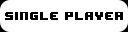
<style>
.page{position:relative;width:128px;height:32px;background:#ffffff}
.page>*{position:absolute;margin:0}
.t1{font:10px "8BITWONDERNominal";color:#000000}
</style>
<div class="page">
<p class="t1" style="left:5px;top:12px;width:118px;height:8px">single player</p>
</div>
